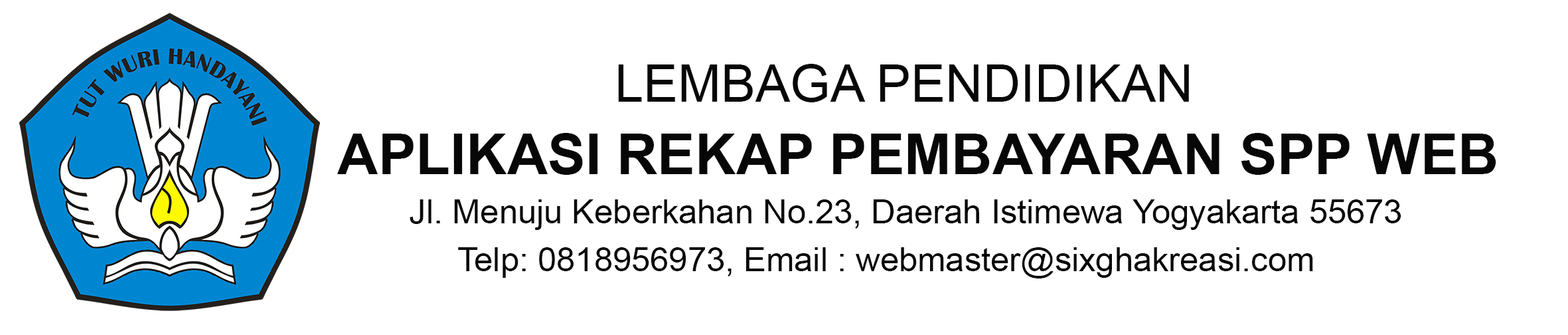
<style>
.page{position:relative;width:1568px;height:335px;background:#ffffff}
.page>*{position:absolute;margin:0}
.t1{font:51.6px "ArialMT";color:#070707}
.t2{font:56.5px "Arial-BoldMT";color:#070707}
.t3{font:33.4px "ArialMT";color:#070707}
</style>
<div class="page">
<p class="t1" style="left:618px;top:64px;width:571px;height:38px">LEMBAGA PENDIDIKAN</p>
<p class="t2" style="left:337px;top:133px;width:1159px;height:42px">APLIKASI REKAP PEMBAYARAN SPP WEB</p>
<p class="t3" style="left:410px;top:199px;width:991px;height:31px">Jl. Menuju Keberkahan No.23, Daerah Istimewa Yogyakarta 55673</p>
<p class="t3" style="left:458px;top:247px;width:855px;height:31px">Telp: 0818956973, Email : webmaster@sixghakreasi.com</p>
</div>
